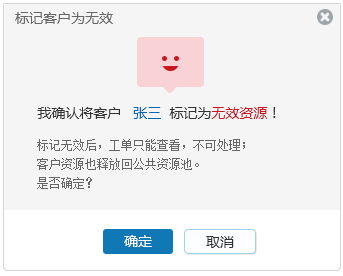
<style>
.page{position:relative;width:343px;height:276px;background:#f5f5f5}
.page>*{position:absolute;margin:0}
.t1{font:14px "MicrosoftYaHei";color:#666666}
.t2{font:14px "MicrosoftYaHei";color:#333333}
.t3{font:14px "MicrosoftYaHei";color:#0068b7}
.t4{font:14px "MicrosoftYaHei";color:#c81623}
.t5{font:12px/19px "NSimSun";color:#666666}
.t6{font:14px "MicrosoftYaHei";color:#ffffff}
</style>
<div class="page">
<p class="t1" style="left:15px;top:12px;width:98px;height:12px">标记客户为无效</p>
<p class="t2" style="left:37px;top:107px;width:239px;height:12px">我确认将客户   <span class="t3">张三</span>  标记为<span class="t4">无效资源</span>！</p>
<p class="t5" style="left:37px;top:139px;width:208px;height:50px">标记无效后，工单只能查看，不可处理；<br>客户资源也释放回公共资源池。<br>是否确定？</p>
<p class="t6" style="left:124px;top:235px;width:28px;height:12px">确定</p>
<p class="t2" style="left:206px;top:236px;width:28px;height:12px">取消</p>
</div>
